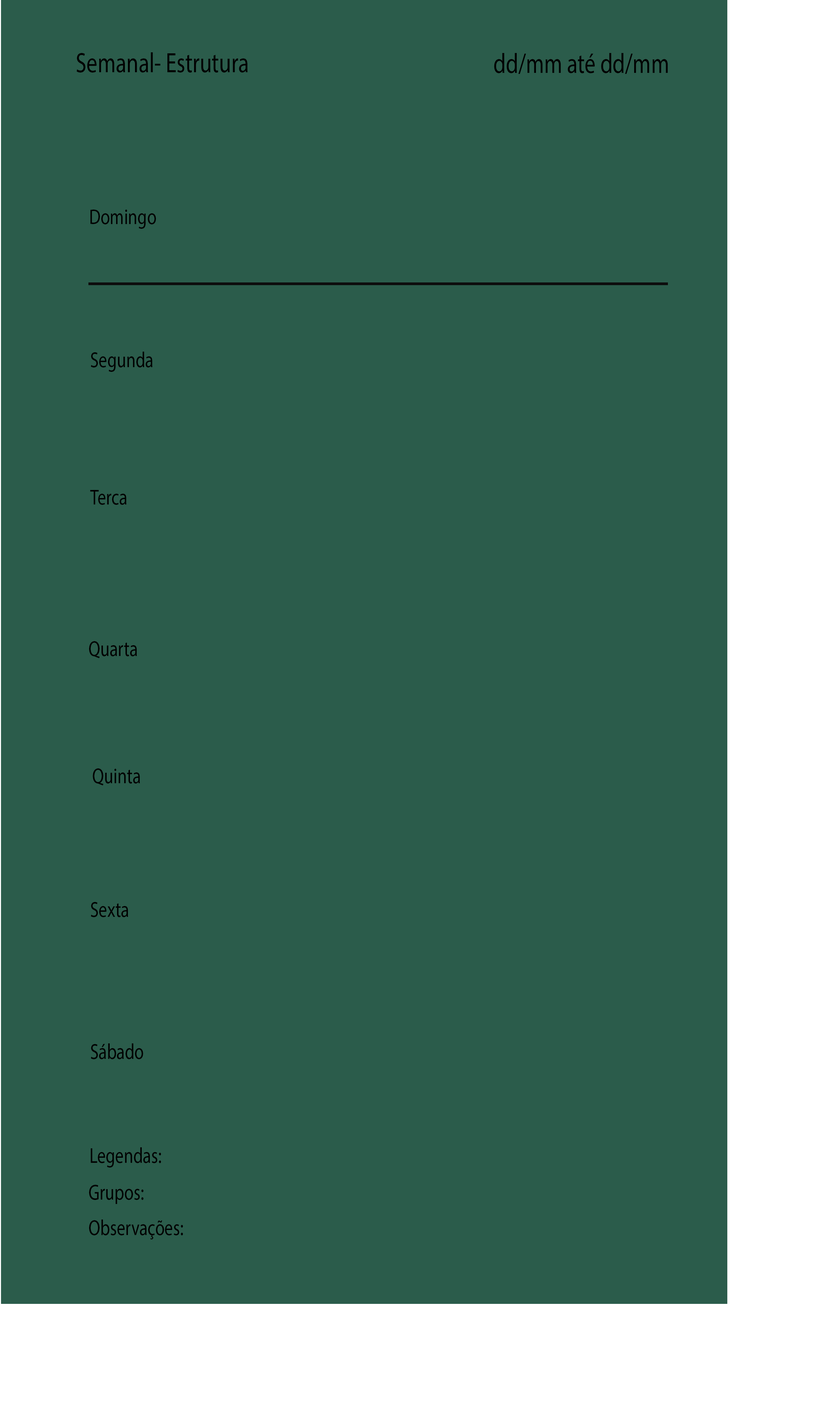
<style>
.page{position:relative;width:837px;height:1424px;background:#2b5c4b}
.page>*{position:absolute;margin:0}
.t1{font:27.9px "MyriadPro-Regular";color:#000000;scale:0.79 1}
.t2{font:21.7px "MyriadPro-Regular";color:#000000;scale:0.79 1}
</style>
<div class="page">
<p class="t1" style="left:77px;top:52px;width:171px;height:21px">Semanal- Estrutura</p>
<p class="t1" style="left:494px;top:53px;width:174px;height:21px">dd/mm até dd/mm</p>
<p class="t2" style="left:90px;top:210px;width:66px;height:19px">Domingo</p>
<p class="t2" style="left:91px;top:352px;width:62px;height:20px">Segunda</p>
<p class="t2" style="left:90px;top:490px;width:37px;height:15px">Terca</p>
<p class="t2" style="left:89px;top:641px;width:48px;height:18px">Quarta</p>
<p class="t2" style="left:93px;top:769px;width:47px;height:17px">Quinta</p>
<p class="t2" style="left:91px;top:902px;width:37px;height:15px">Sexta</p>
<p class="t2" style="left:91px;top:1044px;width:52px;height:16px">Sábado</p>
<p class="t2" style="left:91px;top:1148px;width:70px;height:20px">Legendas:</p>
<p class="t2" style="left:89px;top:1185px;width:54px;height:19px">Grupos:</p>
<p class="t2" style="left:89px;top:1220px;width:94px;height:20px">Observações:</p>
</div>
